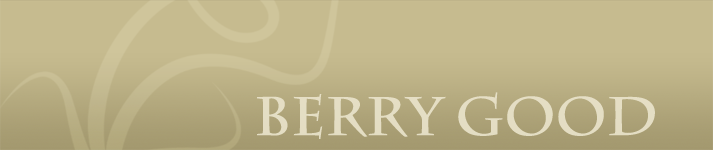
<style>
.page{position:relative;width:713px;height:150px;background:#c6bb8f}
.page>*{position:absolute;margin:0}
.t1{font:54px "CharlemagneStd-Bold";color:#eae4cc}
</style>
<div class="page">
<p class="t1" style="left:257px;top:92px;width:398px;height:47px;opacity:0.9">Berry Good</p>
</div>
